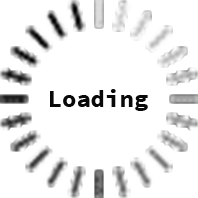
<style>
.page{position:relative;width:198px;height:198px;background:#ffffff}
.page>*{position:absolute;margin:0}
.t1{font:24px "SourceCodePro-Bold";color:#090909}
</style>
<div class="page">
<p class="t1" style="left:50px;top:89px;width:98px;height:22px">Loading</p>
</div>
